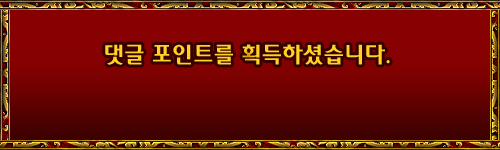
<style>
.page{position:relative;width:500px;height:150px;background:#860100}
.page>*{position:absolute;margin:0}
.t1{font:24px "YDI2002";color:#f8c619}
</style>
<div class="page">
<p class="t1" style="left:105px;top:44px;width:285px;height:21px">댓글 포인트를 획득하셨습니다.</p>
</div>
